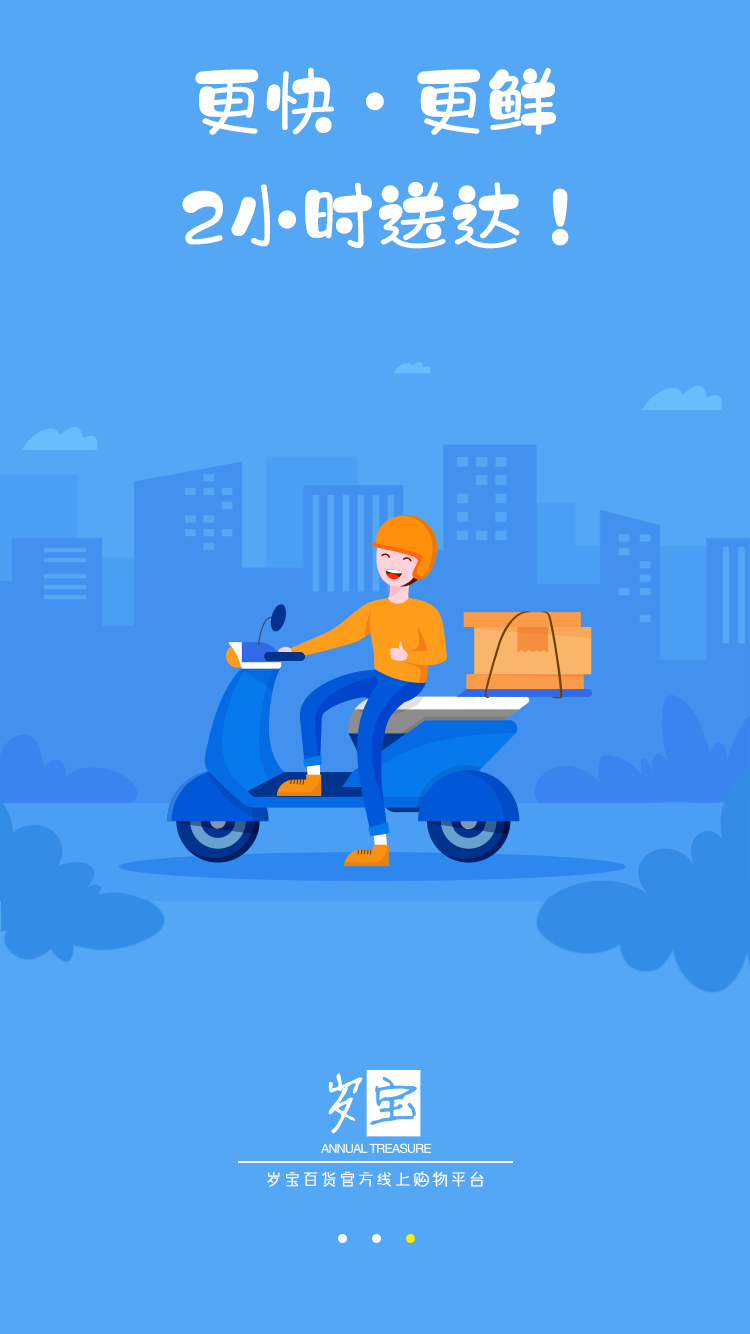
<style>
.page{position:relative;width:750px;height:1334px;background:#53a7f4}
.page>*{position:absolute;margin:0}
.t1{font:72px "HYZiYanKaTongW";color:#ffffff;font-weight:bold}
.t2{font:18px "HYYouYuanTiW";color:#ffffff;font-weight:bold}
</style>
<div class="page">
<p class="t1" style="left:195px;top:67px;width:361px;height:68px">更快·更鲜</p>
<p class="t1" style="left:182px;top:182px;width:387px;height:67px">2小时送达！</p>
<p class="t2" style="left:267px;top:1171px;width:217px;height:16px">岁宝百货官方线上购物平台</p>
</div>
